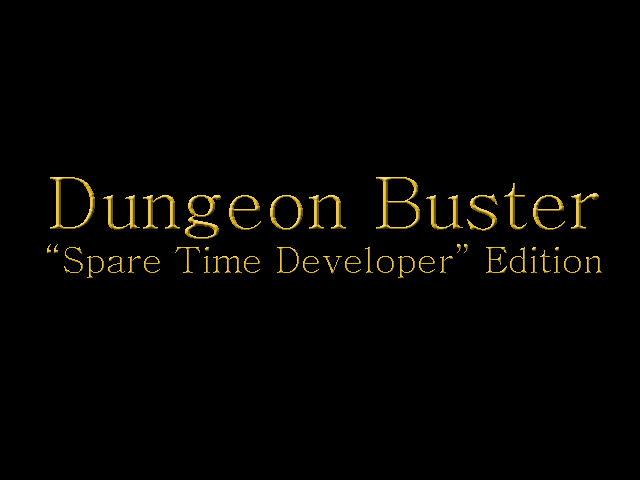
<style>
.page{position:relative;width:640px;height:480px;background:#000000}
.page>*{position:absolute;margin:0}
.t1{font:36px "Batang"}
.t2{font:72px "Batang"}
</style>
<div class="page">
<p class="t1" style="left:47px;top:177px;width:555px;height:101px;text-align:center"><span class="t2">Dungeon Buster<br></span>“Spare Time Developer” Edition</p>
</div>
